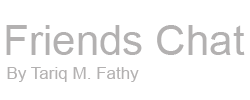
<style>
.page{position:relative;width:250px;height:100px;background:#ffffff}
.page>*{position:absolute;margin:0}
.t1{font:42.2px "ArialMT";color:#b3b1b1}
.t2{font:17px "ArialMT";color:#b3b1b1}
</style>
<div class="page">
<p class="t1" style="left:6px;top:25px;width:239px;height:30px">Friends Chat</p>
<p class="t2" style="left:7px;top:67px;width:132px;height:15px">By Tariq M. Fathy</p>
</div>
